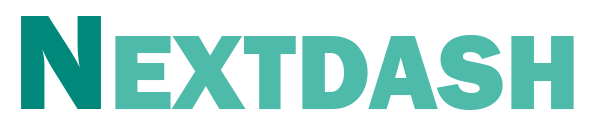
<style>
.page{position:relative;width:595px;height:130px;background:#ffffff}
.page>*{position:absolute;margin:0}
.t1{font:110px "FranklinGothic-Heavy";color:#4ebaaa}
.t2{font:140px "FranklinGothic-Heavy";color:#00897b}
</style>
<div class="page">
<p class="t1" style="left:21px;top:16px;width:553px;height:94px"><span class="t2">N</span>EXTDASH</p>
</div>
